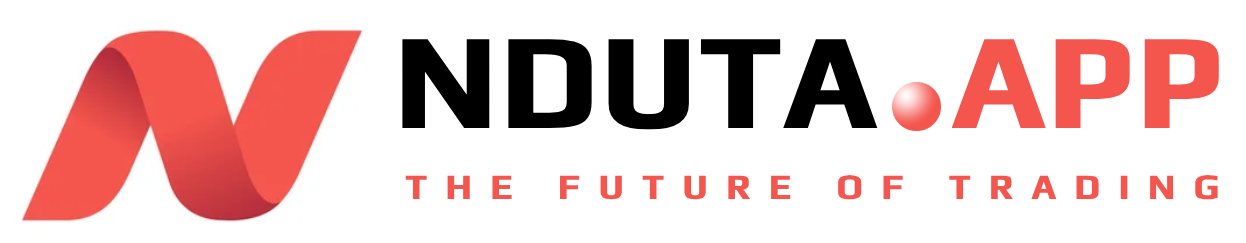
<style>
.page{position:relative;width:1246px;height:243px;background:#ffffff}
.page>*{position:absolute;margin:0}
.t1{font:136.9px "Play-Bold";color:#000000;text-transform:uppercase;font-weight:bold}
.t2{font:136.9px "Play-Bold";color:#f4564e;text-transform:uppercase;font-weight:bold}
.t3{font:36px "Play-Bold";letter-spacing:0.491em;color:#f4564e;text-transform:uppercase;font-weight:bold}
</style>
<div class="page">
<p class="t1" style="left:402px;top:39px;width:817px;height:91px">nduta  <span class="t2">APP</span></p>
<p class="t3" style="left:405px;top:175px;width:813px;height:25px">THE FUTURE OF TRADING</p>
</div>
